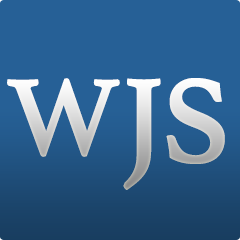
<style>
.page{position:relative;width:240px;height:240px;background:#266096}
.page>*{position:absolute;margin:0}
.t1{font:112px "Athelas-Regular";font-weight:bold}
.t2{font:123.2px "Athelas-Regular";letter-spacing:-0.05em;font-weight:bold}
.t3{font:123.2px "Athelas-Regular";font-weight:bold}
</style>
<div class="page">
<p class="t1" style="left:7px;top:78px;width:218px;height:112px">W<span class="t2">J</span><span class="t3">S</span></p>
</div>
